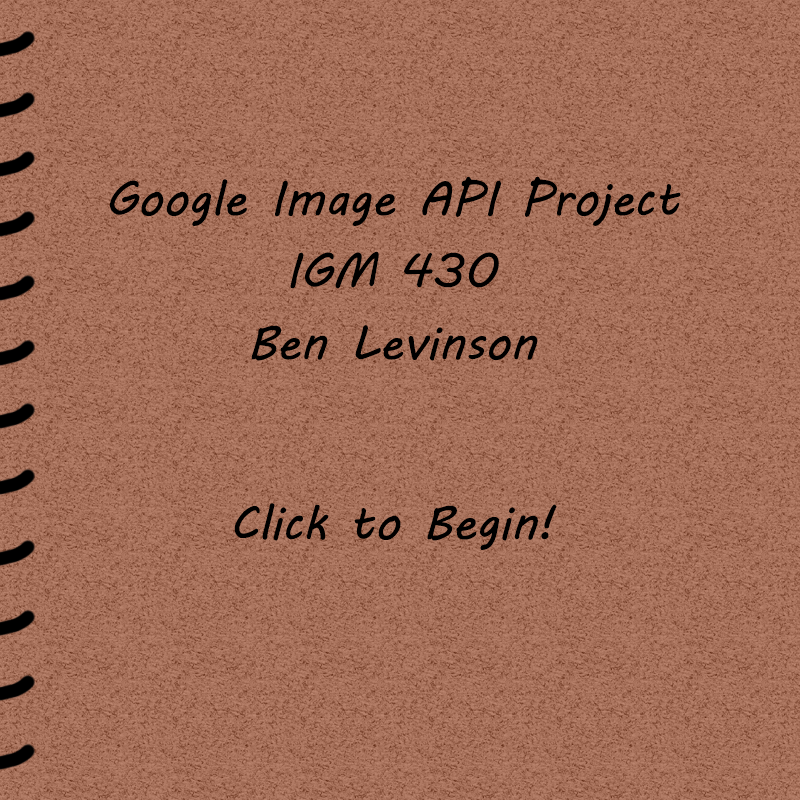
<style>
.page{position:relative;width:800px;height:800px}
.page>*{position:absolute;margin:0}
.t1{font:48px/36px "MVBoli";color:#000000}
</style>
<div class="page">
<p class="t1" style="left:110px;top:176px;width:571px;height:374px;text-align:center">Google Image API Project<br><br>IGM 430<br><br>Ben Levinson<br><br><br><br><br>Click to Begin!</p>
</div>
